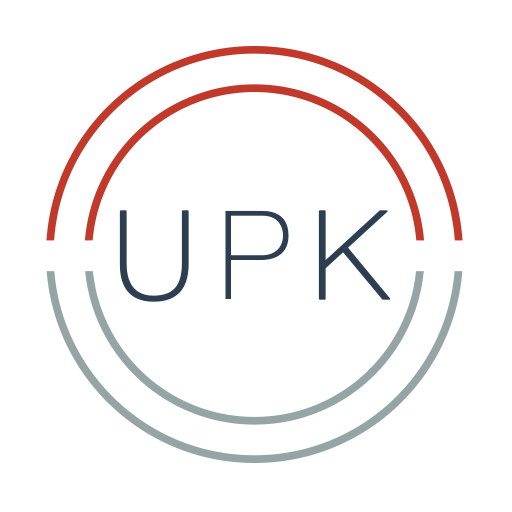
<style>
.page{position:relative;width:512px;height:512px;background:#ffffff}
.page>*{position:absolute;margin:0}
.t1{font:122.9px "HelveticaNeueLTPro-Th";letter-spacing:0.15em;color:#2c3e50;text-transform:uppercase;font-weight:bold}
</style>
<div class="page">
<p class="t1" style="left:119px;top:210px;width:272px;height:92px">UPK</p>
</div>
